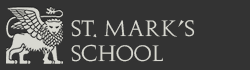
<style>
.page{position:relative;width:250px;height:70px;background:#333333}
.page>*{position:absolute;margin:0}
.t1{font:21px "AureaTitling";color:#d8d8d0}
</style>
<div class="page">
<p class="t1" style="left:71px;top:20px;width:124px;height:42px">St. Mark’s<br>School</p>
</div>
